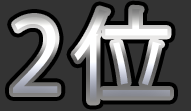
<style>
.page{position:relative;width:191px;height:111px;background:#333333}
.page>*{position:absolute;margin:0}
.t1{font:100px "KozGoPr6N-Regular";letter-spacing:0.1em}
</style>
<div class="page">
<p class="t1" style="left:13px;top:8px;width:157px;height:94px">2位</p>
</div>
